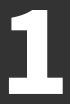
<style>
.page{position:relative;width:70px;height:104px;background:#333333}
.page>*{position:absolute;margin:0}
.t1{font:130.9px "SourceSansPro-Bold";letter-spacing:-0.05em;color:#ffffff}
</style>
<div class="page">
<p class="t1" style="left:8px;top:10px;width:55px;height:84px">1</p>
</div>
